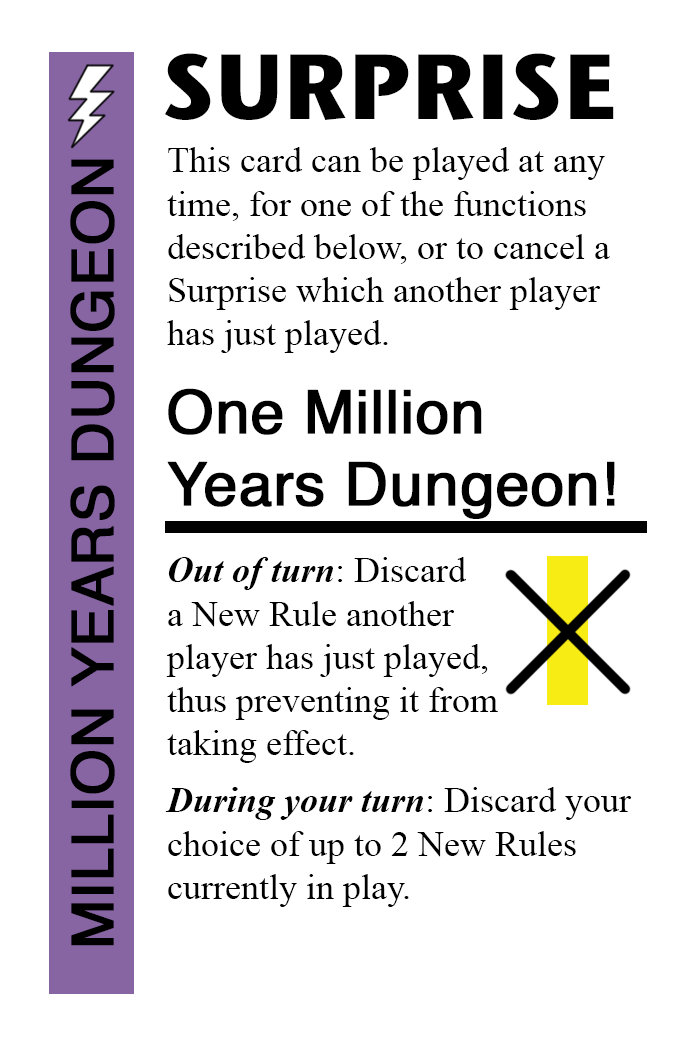
<style>
.page{position:relative;width:700px;height:1042px;background:#ffffff}
.page>*{position:absolute;margin:0}
.t1{font:92px "StoneSansITC-Bold";color:#000000}
.t2{font:36px "TimesNewRomanPSMT";color:#000000}
.t3{font:58px "Helvetica";color:#000000;font-weight:bold}
.t4{font:60px "Helvetica";color:#000000;font-weight:bold}
.t5{font:36px "TimesNewRomanPS-BoldItalicMT";color:#000000}
</style>
<div class="page">
<p class="t1" style="left:165px;top:53px;width:449px;height:67px">SURPRISE</p>
<p class="t2" style="left:167px;top:147px;width:443px;height:206px">This card can be played at any <br>time, for one of the functions<br>described below, or to cancel a<br>Surprise which another player<br>has just played.</p>
<p class="t3" style="left:70px;top:159px;width:45px;height:787px;rotate:-90deg">MILLION YEARS DUNGEON</p>
<p class="t4" style="left:167px;top:388px;width:448px;height:131px">One Million<br>Years Dungeon!</p>
<p class="t2" style="left:166px;top:557px;width:332px;height:206px"><span class="t5">Out of turn</span>: Discard<br>a New Rule another<br>player has just played,<br>thus preventing it from<br>taking effect.</p>
<p class="t2" style="left:165px;top:787px;width:467px;height:120px"><span class="t5">During your turn</span>: Discard your<br>choice of up to 2 New Rules <br>currently in play.</p>
</div>
